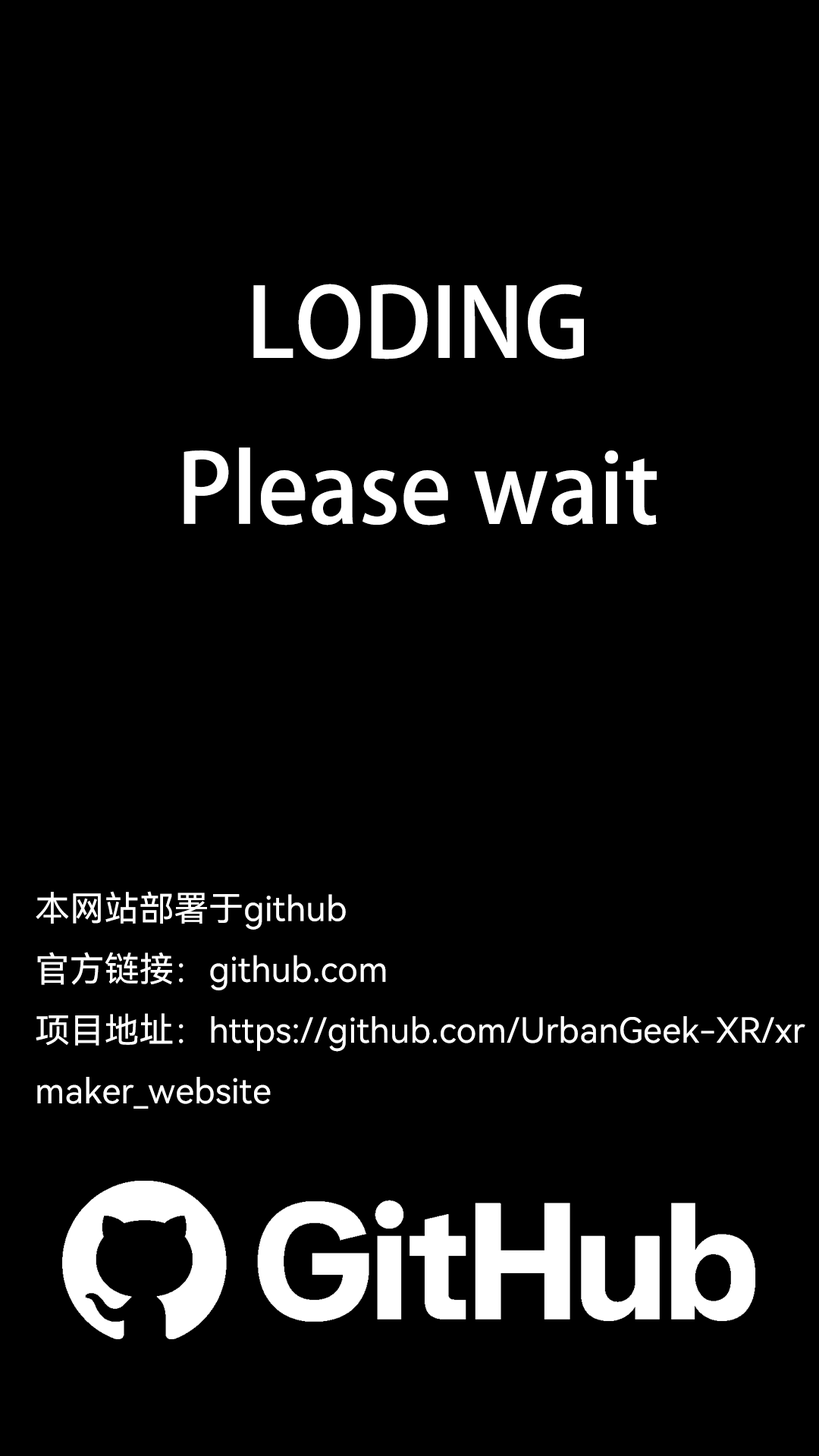
<style>
.page{position:relative;width:819px;height:1456px;background:#000000}
.page>*{position:absolute;margin:0}
.t1{font:94.8px "AdobeHeitiStd-Regular";color:#ffffff}
.t2{font:34.8px "HarmonyOS_Sans_SC";color:#ffffff}
</style>
<div class="page">
<p class="t1" style="left:184px;top:284px;width:473px;height:242px;text-align:center">LODING<br>Please wait</p>
<p class="t2" style="left:36px;top:891px;width:769px;height:218px">本网站部署于github<br>官方链接：github.com<br>项目地址：https://github.com/UrbanGeek-XR/xr<br>maker_website</p>
</div>
